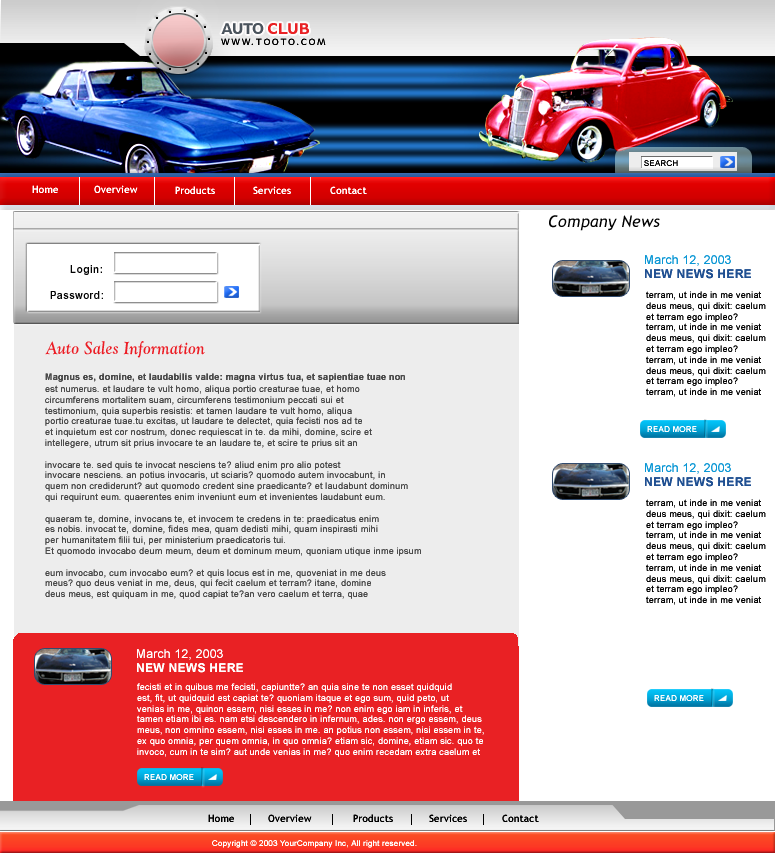
<style>
.page{position:relative;width:775px;height:853px;background:#ffffff}
.page>*{position:absolute;margin:0}
.t1{font:14px "Geometric212BT-Heavy";letter-spacing:-0.1em;color:#4b545d}
.t2{font:14px "Geometric212BT-Heavy";letter-spacing:-0.1em;color:#e92124}
.t3{font:8px "Geometric212BT-Book";letter-spacing:0.2em;color:#000000}
.t4{font:8px "ArialMT";letter-spacing:0.025em;color:#060606}
.t5{font:10px "TrebuchetMS";letter-spacing:0.025em;color:#ffffff}
.t6{font:16px "TrebuchetMS-Italic";letter-spacing:0.025em;color:#000000}
.t7{font:12px "ArialMT";letter-spacing:0.025em;color:#0b97d5}
.t8{font:12px "Arial-BoldMT";letter-spacing:0.025em;color:#205092}
.t9{font:11px "Arial-BoldMT";letter-spacing:0.05em;color:#030303;scale:0.91 1}
.t10{font:10px "Arial-BoldMT";letter-spacing:0.05em;color:#030303}
.t11{font:9px "ArialMT";letter-spacing:0.025em;color:#080808}
.t12{font:17.6px "GoudyOldStyleBT-BoldItalic";letter-spacing:0.025em;color:#ec1d25;scale:0.91 1}
.t13{font:9px "Arial-BoldMT";letter-spacing:0.025em;color:#4c4c4c}
.t14{font:9px "ArialMT";letter-spacing:0.025em;color:#4c4c4c}
.t15{font:8px "ArialMT";letter-spacing:0.025em;color:#ffffff}
.t16{font:12px "ArialMT";letter-spacing:0.025em;color:#fefefe}
.t17{font:12px "Arial-BoldMT";letter-spacing:0.025em;color:#fefefe}
.t18{font:9px "ArialMT";letter-spacing:0.025em;color:#fffdfd}
.t19{font:10px "TrebuchetMS";letter-spacing:0.025em;color:#000000}
.t20{font:8px "ArialMT";letter-spacing:0.025em;color:#fefefe}
</style>
<div class="page">
<p class="t1" style="left:221px;top:23px;width:88px;height:11px">AUTO<span class="t2">  CLUB</span></p>
<p class="t3" style="left:221px;top:38px;width:105px;height:7px">WWW.TOOTO.COM</p>
<p class="t4" style="left:644px;top:160px;width:34px;height:6px">SEARCH</p>
<p class="t5" style="left:32px;top:185px;width:26px;height:8px">Home</p>
<p class="t5" style="left:94px;top:185px;width:44px;height:8px">Overview</p>
<p class="t5" style="left:175px;top:186px;width:40px;height:8px">Products</p>
<p class="t5" style="left:253px;top:186px;width:38px;height:8px">Services</p>
<p class="t5" style="left:330px;top:186px;width:37px;height:8px">Contact</p>
<p class="t6" style="left:549px;top:215px;width:111px;height:16px">Company News</p>
<p class="t7" style="left:645px;top:255px;width:106px;height:24px">March 12, 2003<br><span class="t8">NEW NEWS HERE</span></p>
<p class="t9" style="left:70px;top:265px;width:32px;height:10px">Login:</p>
<p class="t10" style="left:50px;top:291px;width:53px;height:8px">Password:</p>
<p class="t11" style="left:646px;top:291px;width:120px;height:106px">terram, ut inde in me veniat<br>deus meus, qui dixit: caelum<br>et terram ego impleo? <br>terram, ut inde in me veniat<br>deus meus, qui dixit: caelum<br>et terram ego impleo? <br>terram, ut inde in me veniat<br>deus meus, qui dixit: caelum<br>et terram ego impleo? <br>terram, ut inde in me veniat</p>
<p class="t12" style="left:45px;top:341px;width:160px;height:17px">Auto Sales Information</p>
<p class="t13" style="left:45px;top:373px;width:360px;height:9px">Magnus es, domine, et laudabilis valde: magna virtus tua, et sapientiae tuae non</p>
<p class="t14" style="left:45px;top:385px;width:376px;height:214px">est numerus. et laudare te vult homo, aliqua portio creaturae tuae, et homo <br>circumferens mortalitem suam, circumferens testimonium peccati sui et <br>testimonium, quia superbis resistis: et tamen laudare te vult homo, aliqua <br>portio creaturae tuae.tu excitas, ut laudare te delectet, quia fecisti nos ad te <br>et inquietum est cor nostrum, donec requiescat in te. da mihi, domine, scire et <br>intellegere, utrum sit prius invocare te an laudare te, et scire te prius sit an <br><br>invocare te. sed quis te invocat nesciens te? aliud enim pro alio potest <br>invocare nesciens. an potius invocaris, ut sciaris? quomodo autem invocabunt, in <br>quem non crediderunt? aut quomodo credent sine praedicante? et laudabunt dominum <br>qui requirunt eum. quaerentes enim inveniunt eum et invenientes laudabunt eum. <br><br>quaeram te, domine, invocans te, et invocem te credens in te: praedicatus enim <br>es nobis. invocat te, domine, fides mea, quam dedisti mihi, quam inspirasti mihi <br>per humanitatem filii tui, per ministerium praedicatoris tui. <br>Et quomodo invocabo deum meum, deum et dominum meum, quoniam utique inme ipsum <br><br>eum invocabo, cum invocabo eum? et quis locus est in me, quoveniat in me deus <br>meus? quo deus veniat in me, deus, qui fecit caelum et terram? itane, domine <br>deus meus, est quiquam in me, quod capiat te?an vero caelum et terra, quae</p>
<p class="t15" style="left:647px;top:426px;width:50px;height:6px">READ MORE</p>
<p class="t7" style="left:645px;top:463px;width:106px;height:24px">March 12, 2003<br><span class="t8">NEW NEWS HERE</span></p>
<p class="t11" style="left:646px;top:499px;width:120px;height:106px">terram, ut inde in me veniat<br>deus meus, qui dixit: caelum<br>et terram ego impleo? <br>terram, ut inde in me veniat<br>deus meus, qui dixit: caelum<br>et terram ego impleo? <br>terram, ut inde in me veniat<br>deus meus, qui dixit: caelum<br>et terram ego impleo? <br>terram, ut inde in me veniat</p>
<p class="t16" style="left:137px;top:649px;width:106px;height:24px">March 12, 2003<br><span class="t17">NEW NEWS HERE</span></p>
<p class="t18" style="left:137px;top:683px;width:347px;height:74px">fecisti et in quibus me fecisti, capiuntte? an quia sine te non esset quidquid <br>est, fit, ut quidquid est capiat te? quoniam itaque et ego sum, quid peto, ut <br>venias in me, quinon essem, nisi esses in me? non enim ego iam in inferis, et <br>tamen etiam ibi es. nam etsi descendero in infernum, ades. non ergo essem, deus <br>meus, non omnino essem, nisi esses in me. an potius non essem, nisi essem in te, <br>ex quo omnia, per quem omnia, in quo omnia? etiam sic, domine, etiam sic. quo te <br>invoco, cum in te sim? aut unde venias in me? quo enim recedam extra caelum et</p>
<p class="t15" style="left:654px;top:695px;width:50px;height:6px">READ MORE</p>
<p class="t15" style="left:144px;top:774px;width:50px;height:6px">READ MORE</p>
<p class="t19" style="left:208px;top:814px;width:26px;height:8px">Home</p>
<p class="t19" style="left:268px;top:814px;width:44px;height:8px">Overview</p>
<p class="t19" style="left:353px;top:814px;width:40px;height:8px">Products</p>
<p class="t19" style="left:429px;top:814px;width:38px;height:8px">Services</p>
<p class="t19" style="left:502px;top:814px;width:37px;height:8px">Contact</p>
<p class="t20" style="left:212px;top:840px;width:205px;height:8px">Copyright © 2003 YourCompany Inc, All right reserved.</p>
</div>
